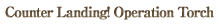
<style>
.page{position:relative;width:219px;height:26px;background:#ffffff}
.page>*{position:absolute;margin:0}
.t1{font:14px "RyuminPro-ExBold";letter-spacing:-0.08em;color:#69553d;font-weight:bold}
</style>
<div class="page">
<p class="t1" style="left:5px;top:6px;width:209px;height:14px">Counter Landing! Operation Torch</p>
</div>
